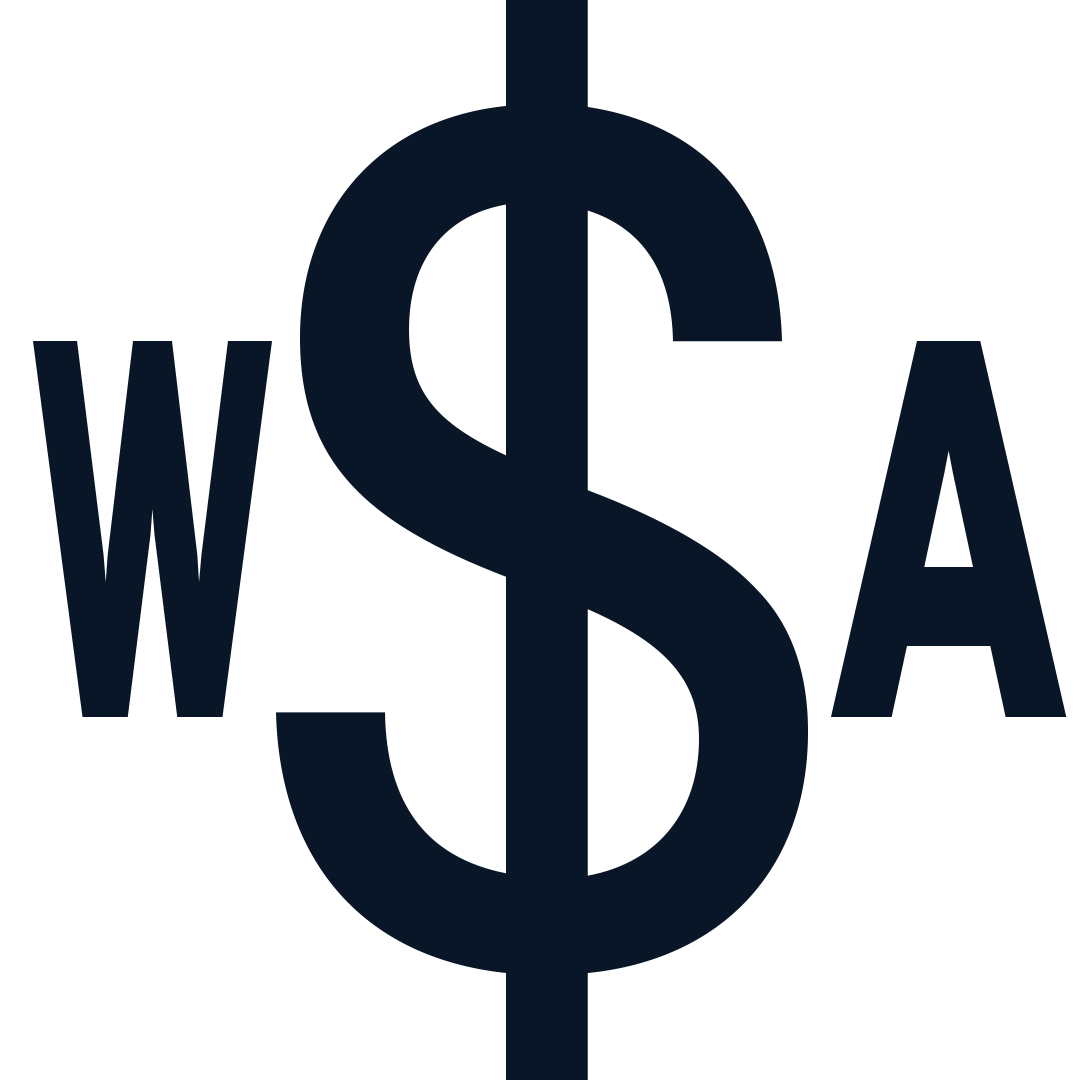
<style>
.page{position:relative;width:1080px;height:1080px;background:#ffffff}
.page>*{position:absolute;margin:0}
.t1{font:537px "Larsseit-ExtraBold";letter-spacing:-0.18em;color:#091627;scale:0.45 1}
.t2{font:537px "Larsseit-ExtraBold";letter-spacing:-0.18em;color:#091627;scale:0.61 1}
</style>
<div class="page">
<p class="t1" style="left:33px;top:341px;width:239px;height:376px">W</p>
<p class="t2" style="left:831px;top:341px;width:236px;height:376px">A</p>
</div>
